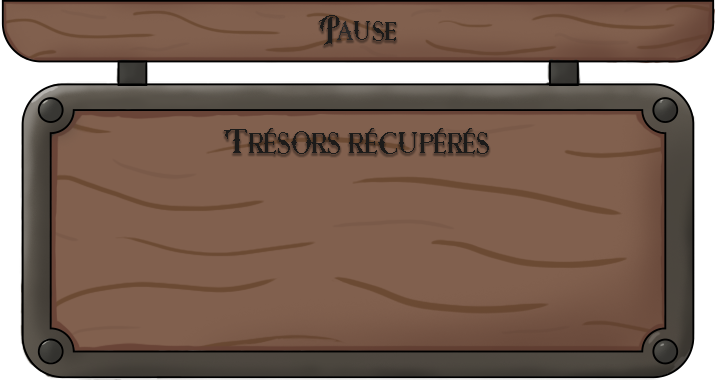
<style>
.page{position:relative;width:715px;height:380px;background:#81604e}
.page>*{position:absolute;margin:0}
.t1{font:32.2px "RoseKnight-Regular";color:#1c1b1a}
.t2{font:32.2px "RoseKnight-Regular";color:#282828}
.t3{font:35.4px "RoseKnight-Regular";color:#1c1b1a}
</style>
<div class="page">
<p class="t1" style="left:319px;top:15px;width:77px;height:30px">P<span class="t2">a</span>use</p>
<p class="t3" style="left:224px;top:128px;width:265px;height:26px">Trésors récupérés</p>
</div>
